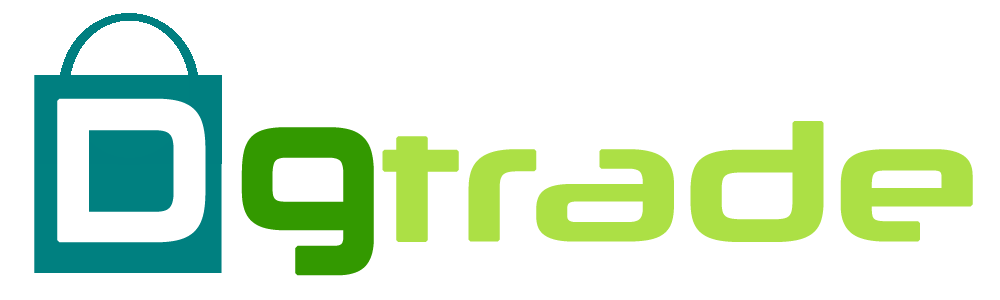
<style>
.page{position:relative;width:1000px;height:300px;background:#ffffff}
.page>*{position:absolute;margin:0}
.t1{font:163.3px "NeuropoliticalRg-Regular";letter-spacing:-0.02em;color:#ace045;font-weight:bold;scale:1.11 1}
.t2{font:204.2px "NeuropoliticalRg-Regular";letter-spacing:0.1em;color:#ffffff;font-weight:bold;scale:0.87 1}
.t3{font:204.2px "NeuropoliticalRg-Regular";letter-spacing:-0.02em;color:#339900;font-weight:bold;scale:0.87 1}
</style>
<div class="page">
<p class="t1" style="left:57px;top:98px;width:916px;height:178px"><span class="t2">D</span><span class="t3">g</span>trade</p>
</div>
